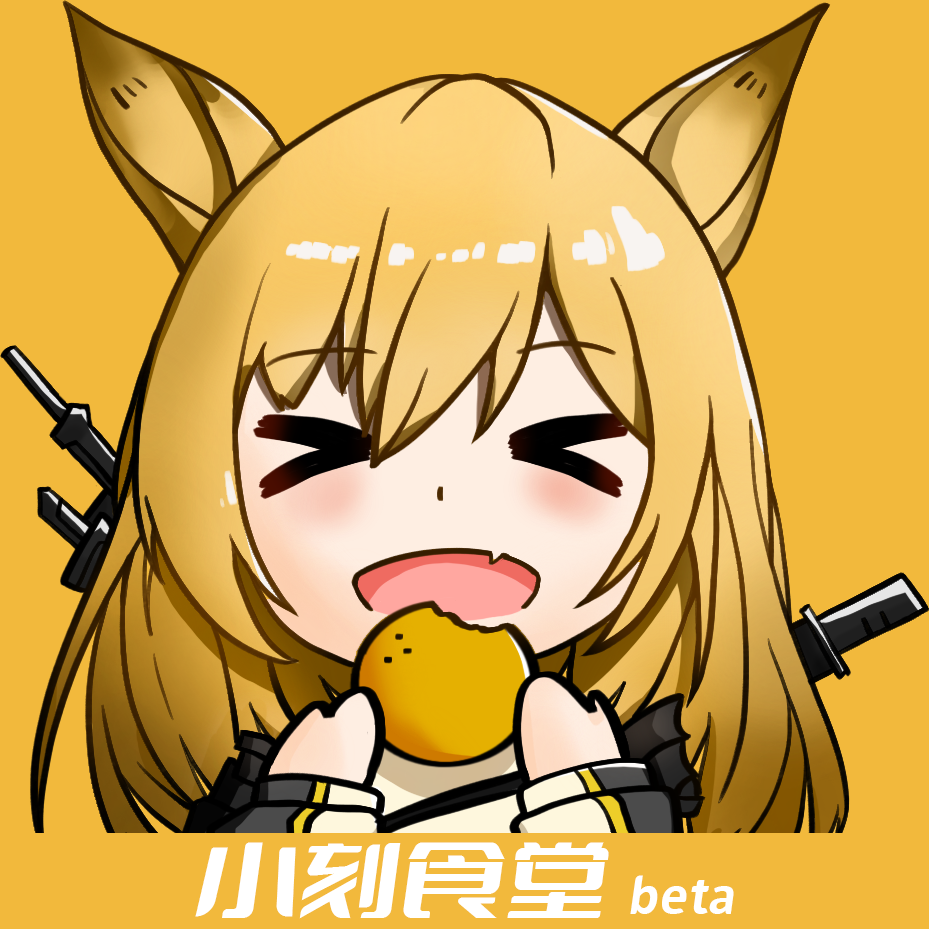
<style>
.page{position:relative;width:929px;height:929px;background:#f2b93c}
.page>*{position:absolute;margin:0}
.t1{font:80px "DOUYUFont";color:#ffffff}
.t2{font:40px "DOUYUFont";color:#ffffff}
</style>
<div class="page">
<p class="t1" style="left:195px;top:842px;width:539px;height:77px">小刻食堂 <span class="t2">beta</span></p>
</div>
